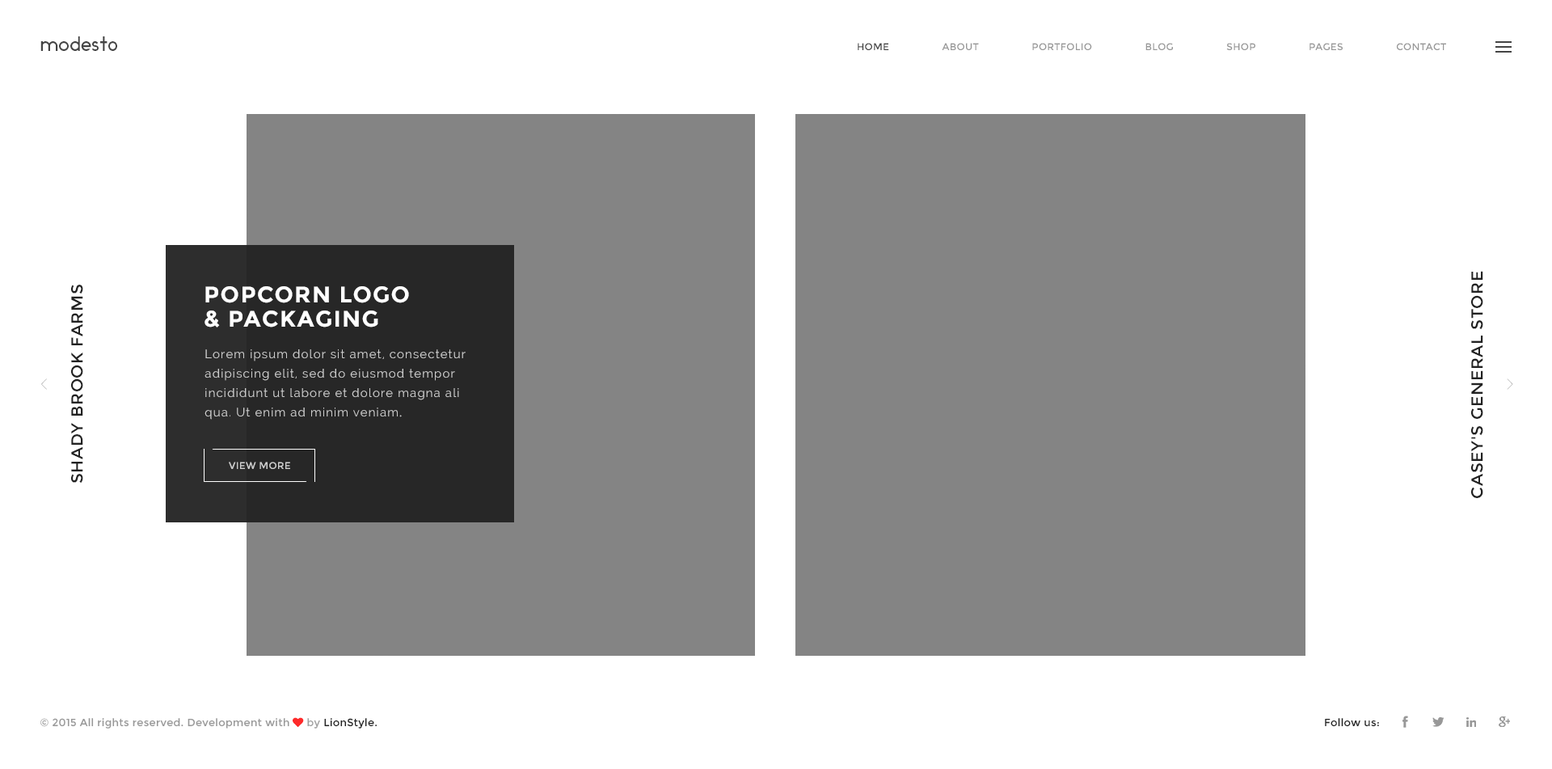
<style>
.page{position:relative;width:1552px;height:769px;background:#ffffff}
.page>*{position:absolute;margin:0}
.t1{font:19.4px "Ikaros";letter-spacing:0.025em;color:#444444}
.t2{font:9.7px "Montserrat-Regular";letter-spacing:0.025em;color:#989898;text-transform:uppercase}
.t3{font:9.7px "Montserrat-Regular";letter-spacing:0.025em;color:#444444;text-transform:uppercase}
.t4{font:16.2px "Montserrat-Regular";letter-spacing:0.025em;color:#222222;text-transform:uppercase;scale:1.03 1}
.t5{font:22.6px/24.2px "Montserrat-Bold";letter-spacing:0.05em;color:#ffffff;text-transform:uppercase}
.t6{font:12.1px/19.4px "Raleway";letter-spacing:0.075em;color:#cfcfcf}
.t7{font:12.1px/19.4px "MinionPro-Regular";letter-spacing:0.075em;color:#cfcfcf}
.t8{font:35.6px "DecorCyrillic";scale:0.6 1}
.t9{font:35.6px "DecorCyrillic";letter-spacing:-0.05em;scale:0.59 1}
.t10{font:9.7px "Montserrat-Regular";letter-spacing:0.025em;color:#cfcfcf;text-transform:uppercase}
.t11{font:10.5px "Montserrat-Regular";letter-spacing:0.025em;color:#989898}
.t12{font:10.5px "FontAwesome";letter-spacing:0.025em;color:#fe2b2b}
.t13{font:10.5px "Montserrat-Regular";letter-spacing:0.025em;color:#a1a1a1}
.t14{font:10.5px "Montserrat-Regular";letter-spacing:0.025em;color:#222222}
</style>
<div class="page">
<p class="t1" style="left:40px;top:36px;width:77px;height:15px">modesto</p>
<p class="t2" style="left:857px;top:43px;width:589px;height:7px"><span class="t3">home                         </span>about                         portfolio                         Blog                         shop                         pages                         contact</p>
<p class="t4" style="left:1471px;top:271px;width:12px;height:227px;rotate:-90deg">Casey's General Store</p>
<p class="t4" style="left:71px;top:284px;width:12px;height:199px;rotate:-90deg">Shady Brook Farms</p>
<p class="t5" style="left:204px;top:286px;width:205px;height:41px">Popcorn Logo<br>&amp; Packaging</p>
<p class="t6" style="left:204px;top:349px;width:261px;height:70px">Lorem ipsum dolor sit amet, consectetur adipiscing elit, sed do eiusmod tempor incididunt ut labore et dolore magna ali qua. Ut enim ad minim veniam<span class="t7">.</span></p>
<p class="t8" style="left:41px;top:378px;width:6px;height:12px">&lt;</p>
<p class="t9" style="left:1506px;top:378px;width:7px;height:12px">&gt;</p>
<p class="t10" style="left:229px;top:461px;width:61px;height:8px">view more</p>
<p class="t11" style="left:40px;top:717px;width:337px;height:11px">© 2015 All rights reserved. Development with <span class="t12">♥ </span><span class="t13">by </span><span class="t14">LionStyle.</span></p>
<p class="t14" style="left:1325px;top:718px;width:54px;height:9px">Follow us:</p>
</div>
